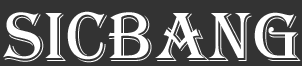
<style>
.page{position:relative;width:302px;height:66px;background:#333333}
.page>*{position:absolute;margin:0}
.t1{font:72px "Algerian";color:#ffffff}
</style>
<div class="page">
<p class="t1" style="left:3px;top:11px;width:298px;height:52px">SICBANG</p>
</div>
